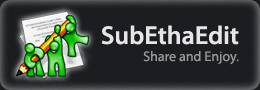
<style>
.page{position:relative;width:260px;height:90px;background:#1c1d20}
.page>*{position:absolute;margin:0}
.t1{font:26px "MyriadPro-Semibold";color:#e6e6e6}
.t2{font:14px "MyriadPro-Regular";color:#999999}
</style>
<div class="page">
<p class="t1" style="left:101px;top:25px;width:138px;height:20px">SubEthaEdit</p>
<p class="t2" style="left:143px;top:51px;width:96px;height:14px">Share and Enjoy.</p>
</div>
